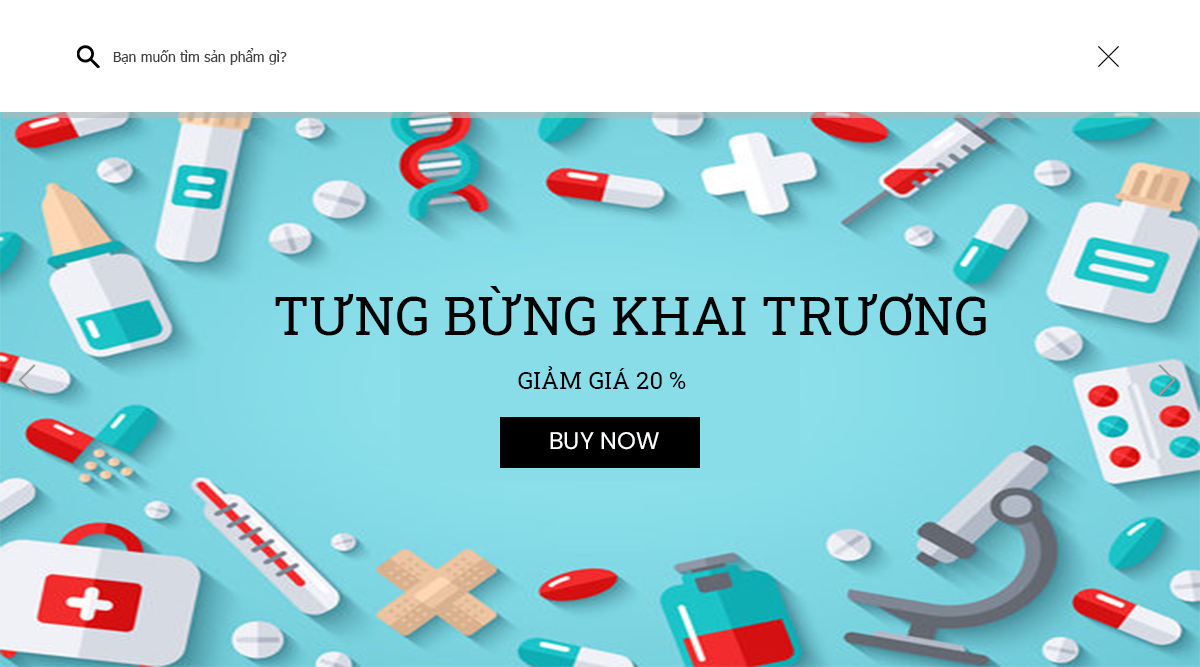
<style>
.page{position:relative;width:1200px;height:667px}
.page>*{position:absolute;margin:0}
.t1{font:14px "Tahoma";color:#424242}
.t2{font:53px "RobotoSlab-Regular";color:#010101}
.t3{font:24px "RobotoSlab-Regular";color:#000000}
</style>
<div class="page">
<p class="t1" style="left:113px;top:48px;width:174px;height:17px">Bạn muốn tìm sản phẩm gì?</p>
<p class="t2" style="left:275px;top:286px;width:711px;height:50px">TƯNG BỪNG KHAI TRƯƠNG</p>
<p class="t3" style="left:518px;top:366px;width:168px;height:23px">GIẢM GIÁ 20 %</p>
</div>
